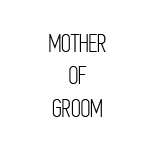
<style>
.page{position:relative;width:156px;height:153px;background:#ffffff}
.page>*{position:absolute;margin:0}
.t1{font:27px "Simplifica";color:#000000}
.t2{font:17px "Glamor-BoldCondensedItalic";color:#000000}
</style>
<div class="page">
<p class="t1" style="left:49px;top:34px;width:57px;height:83px;text-align:center"><span class="t2"><br></span>MOTHER<br>OF<br>GROOM</p>
</div>
